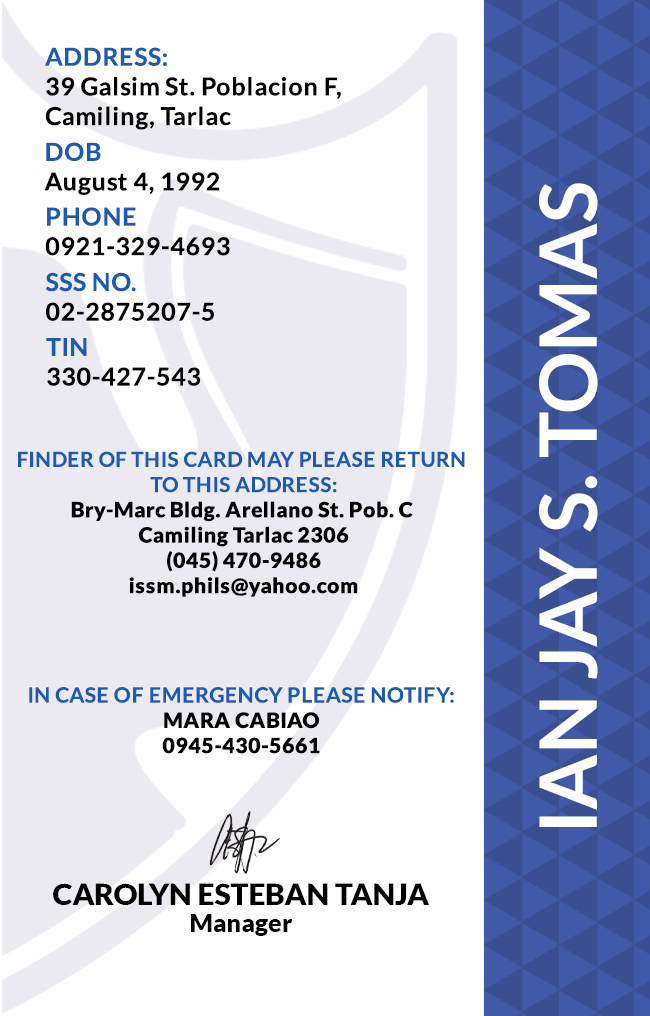
<style>
.page{position:relative;width:650px;height:1016px;background:#ffffff}
.page>*{position:absolute;margin:0}
.t1{font:24.7px/29.6px "Lato-Bold";letter-spacing:0.025em;color:#000000}
.t2{font:24.7px/29.6px "Lato-Bold";letter-spacing:0.025em}
.t3{font:79.2px "Lato-Bold";color:#ffffff}
.t4{font:21.1px "Lato-Black";letter-spacing:0.025em}
.t5{font:20.5px/25.3px "Lato-Bold";letter-spacing:0.025em;text-transform:uppercase}
.t6{font:21.1px/25.3px "Lato-Bold";letter-spacing:0.025em}
.t7{font:29.5px "Lato-Black";color:#000000}
.t8{font:25px "Lato-Black";color:#000000}
</style>
<div class="page">
<p class="t1" style="left:45px;top:47px;width:296px;height:83px">ADDRESS:<br>39 Galsim St. Poblacion F,<br>Camiling, Tarlac</p>
<p class="t2" style="left:44px;top:142px;width:176px;height:53px">DOB<br>August 4, 1992</p>
<p class="t3" style="left:539px;top:183px;width:59px;height:644px;rotate:-90deg">IAN JAY S. TOMAS</p>
<p class="t2" style="left:45px;top:207px;width:185px;height:49px">PHONE <br>0921-329-4693</p>
<p class="t2" style="left:45px;top:272px;width:169px;height:49px">SSS NO.<br>02-2875207-5</p>
<p class="t1" style="left:46px;top:338px;width:155px;height:48px">TIN<br>330-427-543</p>
<p class="t4" style="left:18px;top:451px;width:447px;height:146px;text-align:center"><span class="t5">Finder of this card may please return <br>to this address:<br></span>Bry-Marc Bldg. Arellano St. Pob. C <br>Camiling Tarlac 2306<br>(045) 470-9486<br>issm.phils@yahoo.com</p>
<p class="t6" style="left:29px;top:687px;width:425px;height:67px;text-align:center">IN CASE OF EMERGENCY PLEASE NOTIFY:<br><span class="t4">MARA CABIAO<br>0945-430-5661</span></p>
<p class="t7" style="left:53px;top:883px;width:376px;height:22px">CAROLYN ESTEBAN TANJA</p>
<p class="t8" style="left:191px;top:914px;width:102px;height:22px">Manager</p>
</div>
